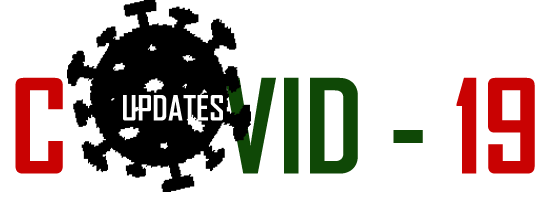
<style>
.page{position:relative;width:550px;height:200px;background:#ffffff}
.page>*{position:absolute;margin:0}
.t1{font:125px "AgencyFB-Bold";color:#0f4806}
.t2{font:125px "AgencyFB-Bold";color:#c90202}
.t3{font:33.3px "AgencyFB-Bold";color:#ffffff}
</style>
<div class="page">
<p class="t1" style="left:15px;top:77px;width:520px;height:97px"><span class="t2">C</span>      VID - <span class="t2">19</span></p>
<p class="t3" style="left:123px;top:95px;width:100px;height:26px">UPDATES</p>
</div>
